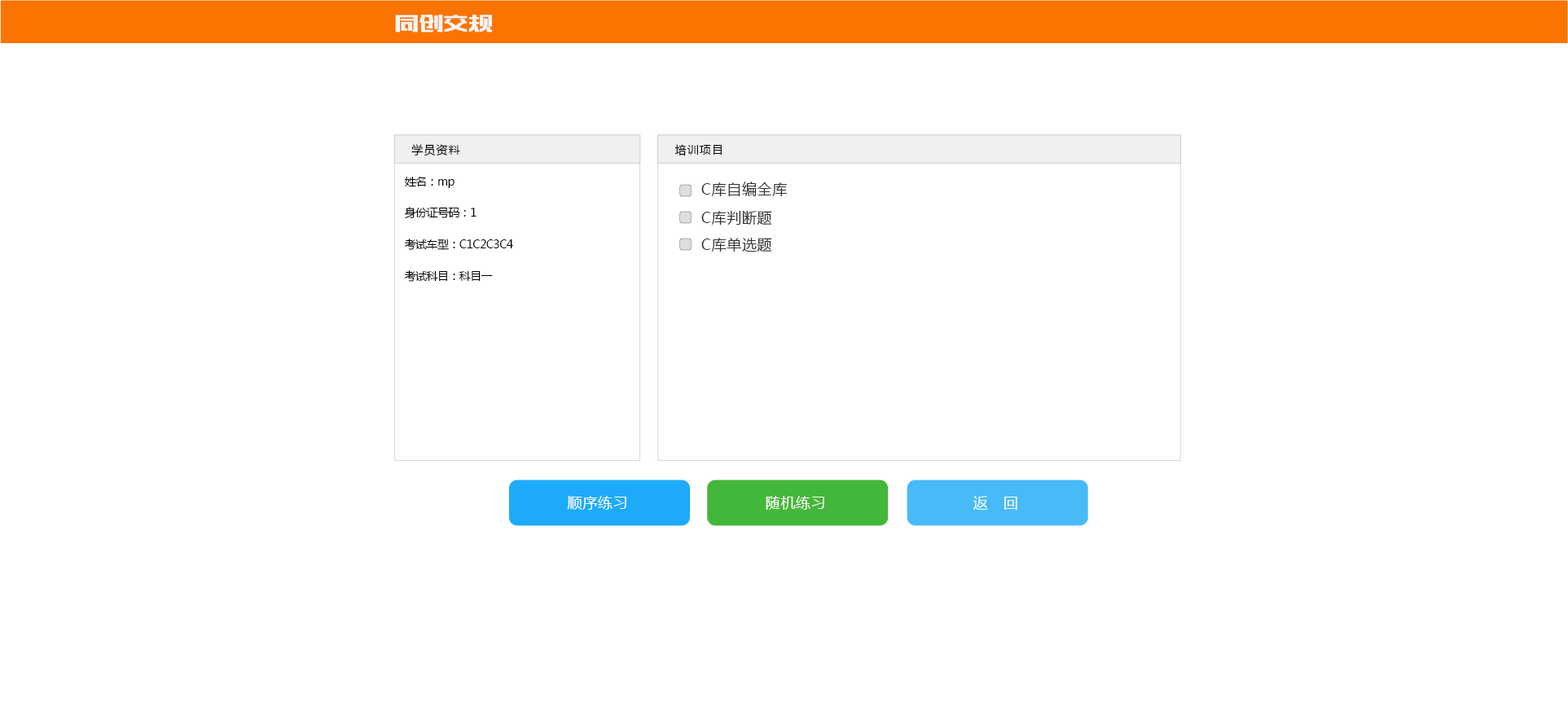
<style>
.page{position:relative;width:1568px;height:723px;background:#ffffff}
.page>*{position:absolute;margin:0}
.t1{font:23.2px "MFBanHei_Noncommercial-Regular";letter-spacing:0.055em;color:#f5f5f5;text-transform:uppercase}
.t2{font:11.4px "MicrosoftYaHei";letter-spacing:0.08em;color:#000000}
.t3{font:11.4px/31.6px "MicrosoftYaHei";letter-spacing:-0.04em;color:#000000}
.t4{font:14.7px "MicrosoftYaHei";letter-spacing:0.04em;color:#333333}
.t5{font:14.7px "MicrosoftYaHei";letter-spacing:0.04em;color:#ffffff}
</style>
<div class="page">
<p class="t1" style="left:395px;top:15px;width:98px;height:18px">同创交规</p>
<p class="t2" style="left:411px;top:144px;width:49px;height:12px">学员资料</p>
<p class="t2" style="left:674px;top:144px;width:48px;height:12px">培训项目</p>
<p class="t3" style="left:404px;top:177px;width:109px;height:105px">姓名：mp<br>身份证号码：1<br>考试车型：C1C2C3C4<br>考试科目：科目一</p>
<p class="t4" style="left:701px;top:182px;width:86px;height:14px">C库自编全库</p>
<p class="t4" style="left:701px;top:211px;width:71px;height:14px">C库判断题</p>
<p class="t4" style="left:701px;top:238px;width:71px;height:14px">C库单选题</p>
<p class="t5" style="left:567px;top:496px;width:59px;height:14px">顺序练习</p>
<p class="t5" style="left:766px;top:496px;width:58px;height:14px">随机练习</p>
<p class="t5" style="left:973px;top:496px;width:44px;height:14px">返   回</p>
</div>
